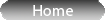
<style>
.page{position:relative;width:105px;height:20px}
.page>*{position:absolute;margin:0}
.t1{font:16px "MyriadPro-Regular";color:#ffffff}
</style>
<div class="page">
<p class="t1" style="left:33px;top:5px;width:40px;height:11px">Home</p>
</div>
